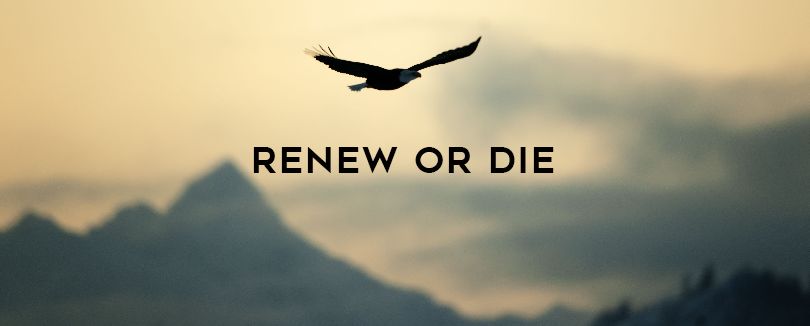
<style>
.page{position:relative;width:810px;height:326px}
.page>*{position:absolute;margin:0}
.t1{font:36px "Geometos";letter-spacing:0.05em;color:#030000}
</style>
<div class="page">
<p class="t1" style="left:253px;top:147px;width:301px;height:26px">renew or die</p>
</div>
